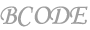
<style>
.page{position:relative;width:90px;height:30px;background:#ffffff}
.page>*{position:absolute;margin:0}
.t1{font:29px "STLiti";color:#9e9e9e}
</style>
<div class="page">
<p class="t1" style="left:0px;top:6px;width:88px;height:21px">BCODE</p>
</div>
